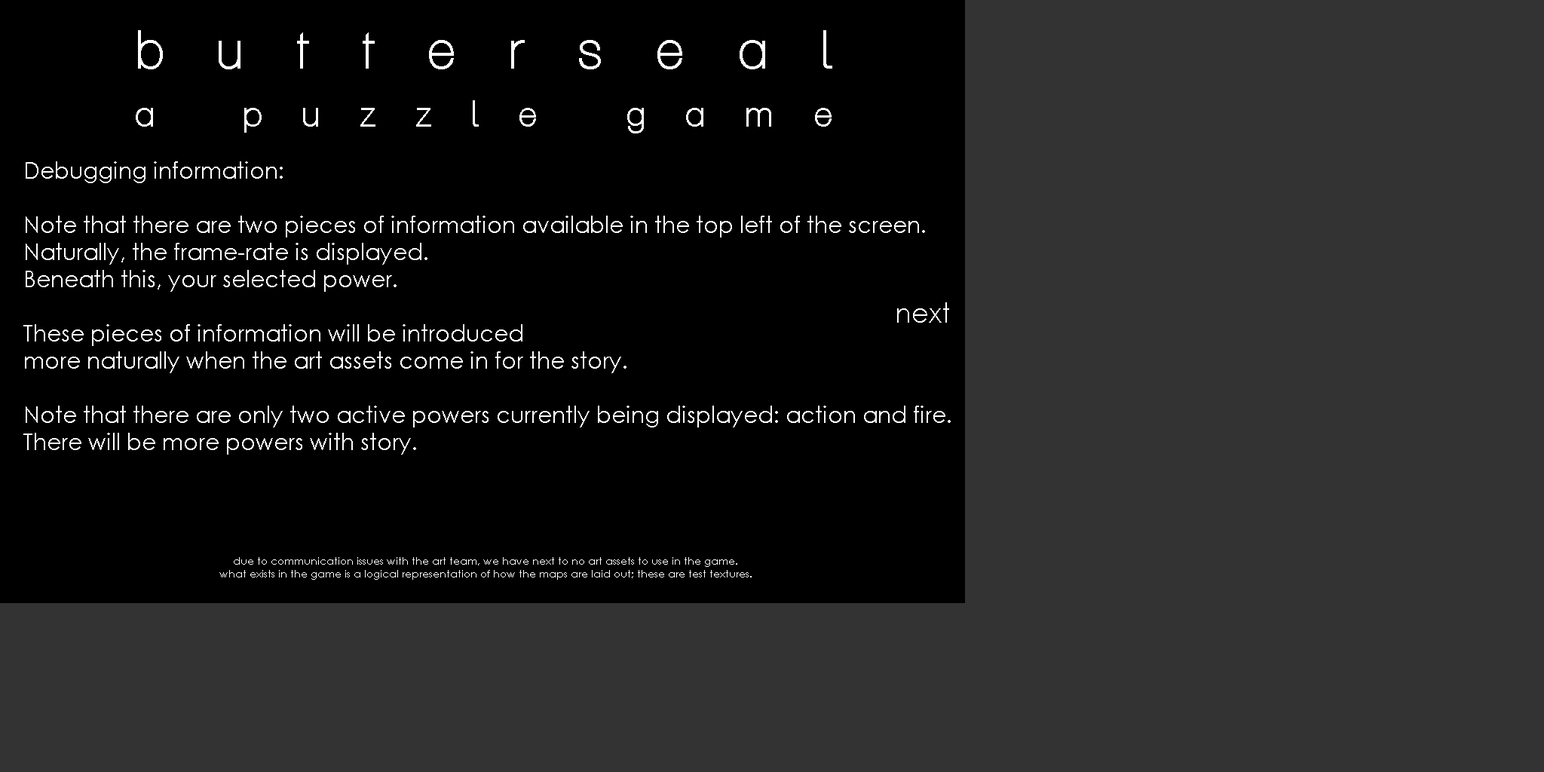
<style>
.page{position:relative;width:1544px;height:772px;background:#333333}
.page>*{position:absolute;margin:0}
.t1{font:36.9px/58.1px "Aliquam";letter-spacing:1.1em;color:#ffffff}
.t2{font:54.3px/58.1px "Aliquam";letter-spacing:1em;color:#ffffff}
.t3{font:22.6px "CenturyGothic";color:#ffffff}
.t4{font:27.1px "CenturyGothic";color:#ffffff}
.t5{font:10.6px "CenturyGothic";color:#ffffff}
</style>
<div class="page">
<p class="t1" style="left:136px;top:30px;width:696px;height:103px;text-align:center"><span class="t2">butterseal<br></span>a puzzle game</p>
<p class="t3" style="left:23px;top:161px;width:928px;height:294px">Debugging information:<br><br>Note that there are two pieces of information available in the top left of the screen.<br>Naturally, the frame-rate is displayed.<br>Beneath this, your selected power.<br><br>These pieces of information will be introduced<br>more naturally when the art assets come in for the story.<br><br>Note that there are only two active powers currently being displayed: action and fire.<br>There will be more powers with story.</p>
<p class="t4" style="left:897px;top:302px;width:52px;height:21px">next</p>
<p class="t5" style="left:219px;top:557px;width:533px;height:23px;text-align:center">due to communication issues with the art team, we have next to no art assets to use in the game.<br>what exists in the game is a logical representation of how the maps are laid out; these are test textures.</p>
</div>
